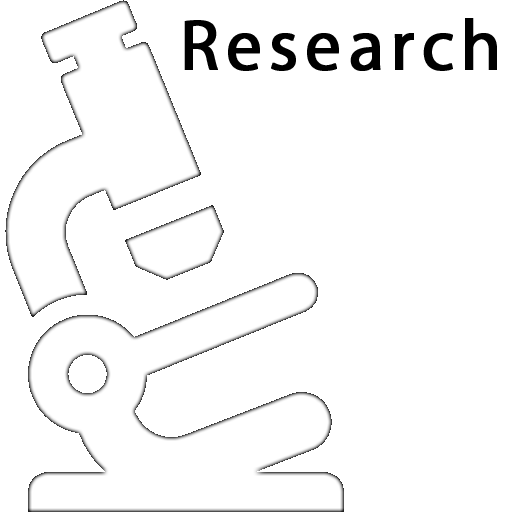
<style>
.page{position:relative;width:512px;height:512px;background:#ffffff}
.page>*{position:absolute;margin:0}
.t1{font:72px "MyriadPro-Regular";letter-spacing:0.075em;color:#000000;font-weight:bold}
</style>
<div class="page">
<p class="t1" style="left:184px;top:18px;width:313px;height:53px">Research</p>
</div>
